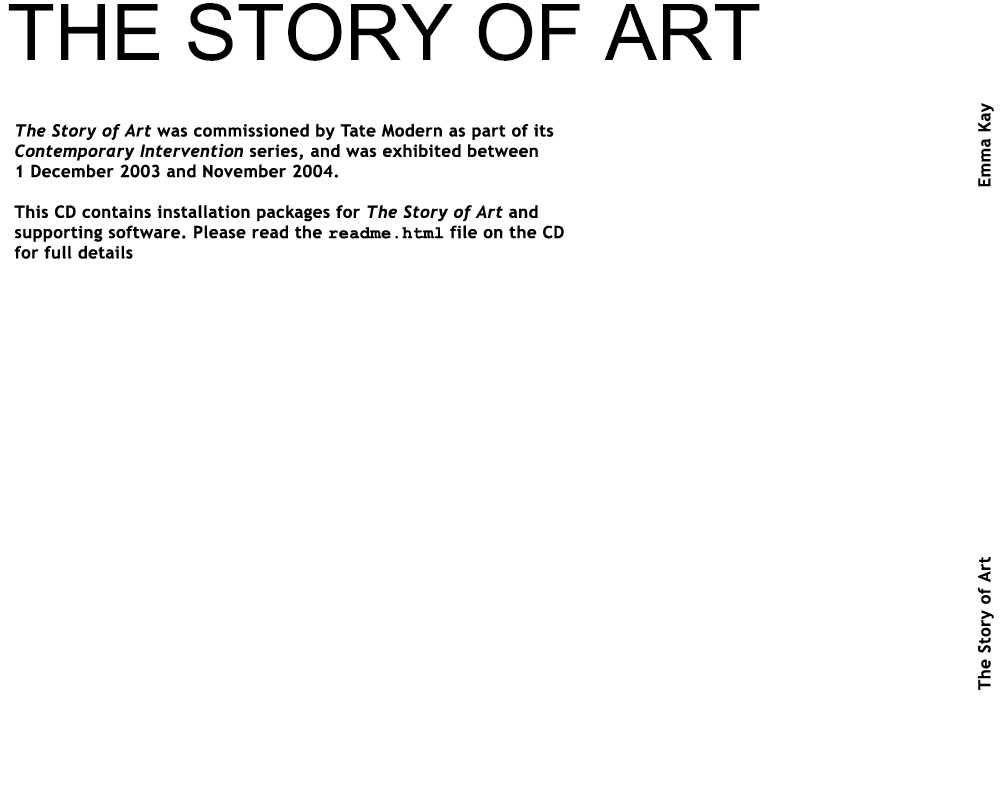
<style>
.page{position:relative;width:1000px;height:800px;background:#ffffff}
.page>*{position:absolute;margin:0}
.t1{font:16.9px "TrebuchetMS-Bold";letter-spacing:0.025em;color:#000000}
.t2{font:16.9px "Trebuchet-BoldItalic";letter-spacing:0.025em;color:#000000}
.t3{font:16.9px "CourierNewPS-BoldMT";letter-spacing:0.025em;color:#000000}
</style>
<div class="page">
<p class="t1" style="left:14px;top:123px;width:550px;height:136px"><span class="t2">The Story of Art</span> was commissioned by Tate Modern as part of its<br><span class="t2">Contemporary Intervention</span> series, and was exhibited between <br>1 December 2003 and November 2004.<br><br>This CD contains installation packages for <span class="t2">The Story of Art </span>and <br>supporting software. Please read the <span class="t3">readme.html</span> file on the CD<br>for full details</p>
</div>
